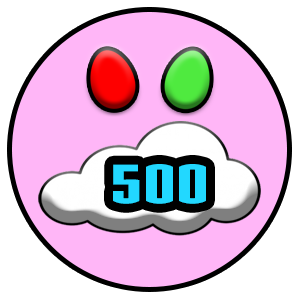
<style>
.page{position:relative;width:300px;height:300px;background:#ffb6f7}
.page>*{position:absolute;margin:0}
.t1{font:52.7px "IRONMANOFWAR002NCV";letter-spacing:0.01em;color:#22d8ff;scale:1.41 1}
</style>
<div class="page">
<p class="t1" style="left:113px;top:164px;width:93px;height:40px">500</p>
</div>
